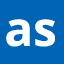
<style>
.page{position:relative;width:64px;height:64px;background:#0064b4}
.page>*{position:absolute;margin:0}
.t1{font:47.6px "OpenSans-Bold";color:#ffffff}
</style>
<div class="page">
<p class="t1" style="left:6px;top:19px;width:49px;height:28px">as</p>
</div>
